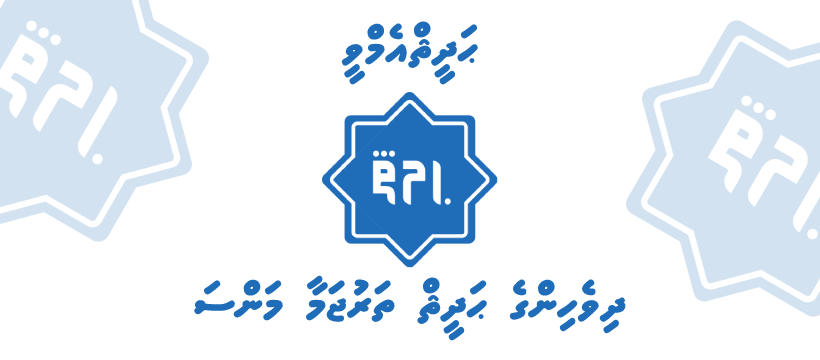
<style>
.page{position:relative;width:820px;height:360px;background:#ffffff}
.page>*{position:absolute;margin:0}
.t1{font:45px "MVAaamuFK";color:#1f6cb9}
</style>
<div class="page">
<p class="t1" style="left:341px;top:21px;width:137px;height:64px">ޙަދީޘްއެމްވީ</p>
<p class="t1" style="left:194px;top:275px;width:432px;height:66px">ދިވެހިންގެ ޙަދީޘް ތަރުޖަމާ މަންސަ</p>
</div>
